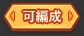
<style>
.page{position:relative;width:84px;height:36px}
.page>*{position:absolute;margin:0}
.t1{font:13px "GothicMB101Pr6N-Medium";color:#fffbdd}
</style>
<div class="page">
<p class="t1" style="left:23px;top:10px;width:39px;height:13px">可編成</p>
</div>
